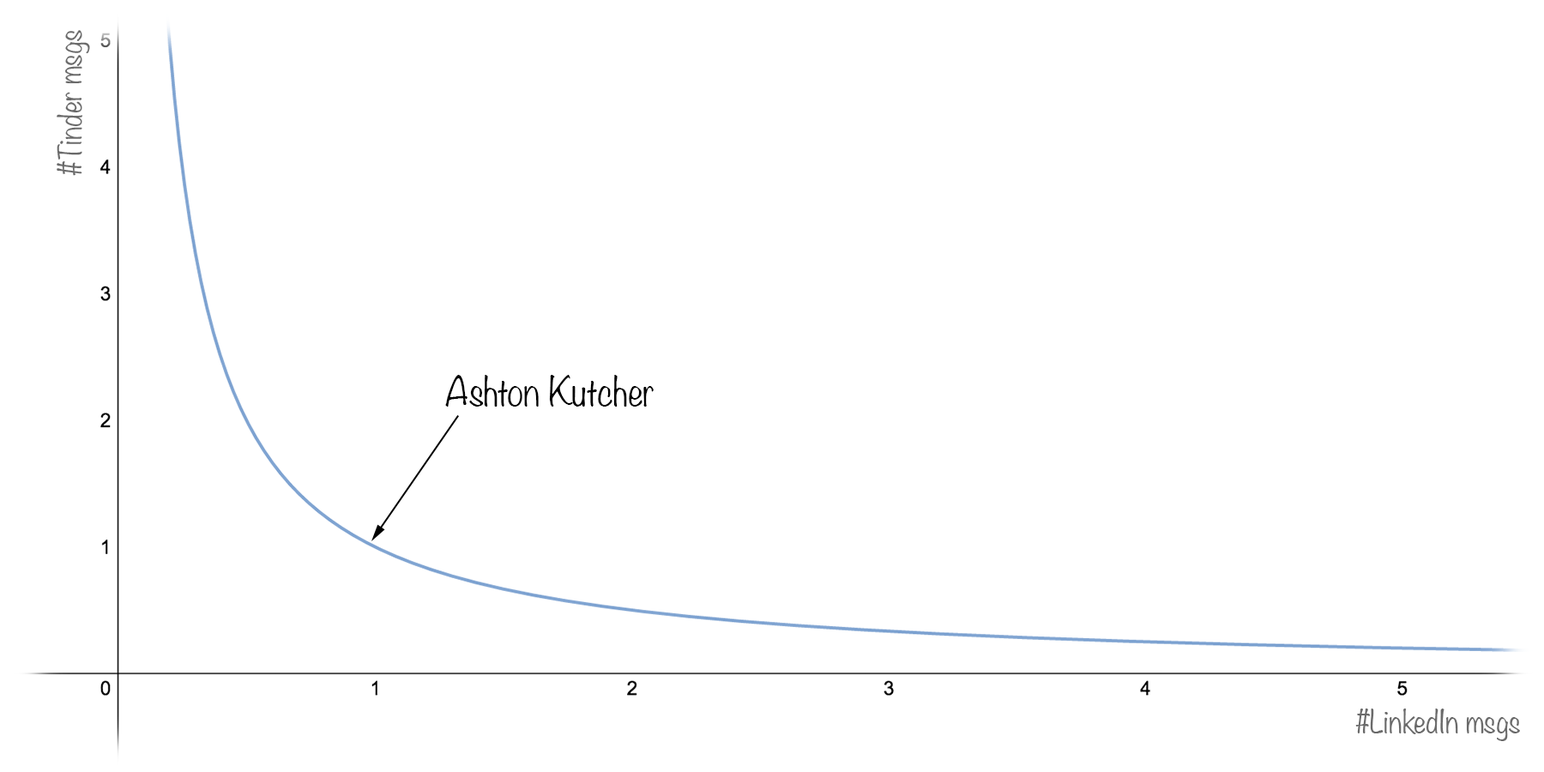
<style>
.page{position:relative;width:1544px;height:772px;background:#ffffff}
.page>*{position:absolute;margin:0}
.t1{font:28.6px "Noteworthy-Light";color:#6a6a6a}
.t2{font:35.7px "Noteworthy-Light";color:#000000}
</style>
<div class="page">
<p class="t1" style="left:57px;top:30px;width:33px;height:146px;rotate:-90deg">#Tinder msgs</p>
<p class="t2" style="left:445px;top:375px;width:209px;height:32px">Ashton Kutcher</p>
<p class="t1" style="left:1356px;top:709px;width:164px;height:32px">#LinkedIn msgs</p>
</div>
